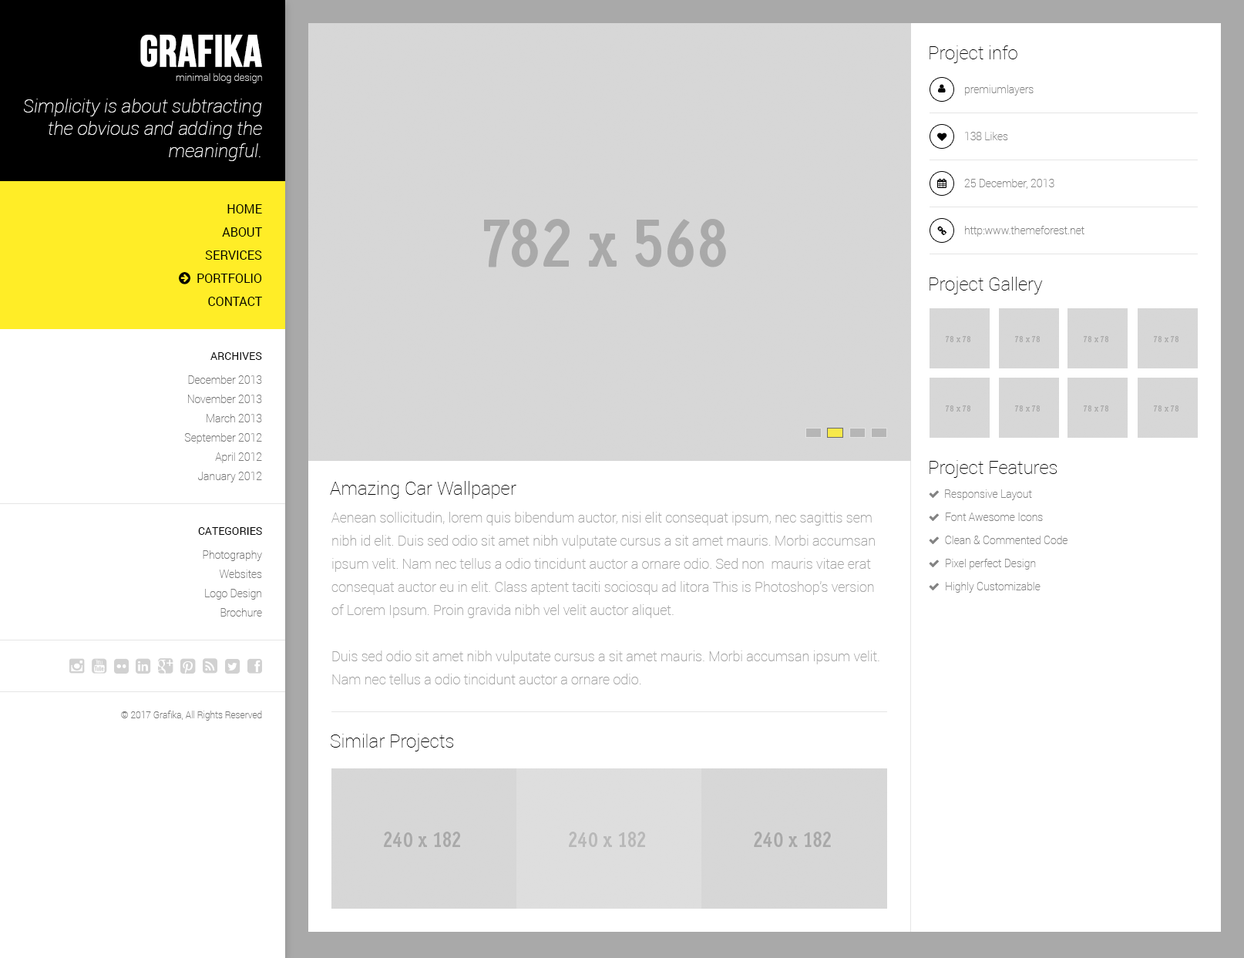
<style>
.page{position:relative;width:1244px;height:958px;background:#ffffff}
.page>*{position:absolute;margin:0}
.t1{font:44.7px "BebasNeue";color:#ffffff;text-transform:uppercase;font-weight:bold}
.t2{font:18.5px "Roboto-Thin";color:#000000}
.t3{font:10px "Roboto-Thin";color:#cacaca}
.t4{font:10.8px "Roboto-Thin";color:#848484}
.t5{font:18.5px "Roboto-ThinItalic";color:#ffffff}
.t6{font:12.3px/23.1px "Roboto-Regular";color:#000000;text-transform:uppercase}
.t7{font:10.8px "Roboto-Regular";color:#000000;text-transform:uppercase}
.t8{font:10.8px/19.3px "Roboto-Thin";color:#787878}
.t9{font:13.9px/23.1px "Roboto-Thin";color:#a3a3a3}
.t10{font:9.3px "Roboto-Thin";color:#787878}
</style>
<div class="page">
<p class="t1" style="left:140px;top:35px;width:122px;height:32px">Grafika</p>
<p class="t2" style="left:930px;top:45px;width:88px;height:18px">Project info</p>
<p class="t3" style="left:176px;top:73px;width:86px;height:10px">minimal blog design</p>
<p class="t4" style="left:965px;top:85px;width:69px;height:11px">premiumlayers</p>
<p class="t5" style="left:24px;top:99px;width:238px;height:62px;text-align:right">Simplicity is about subtracting the obvious and adding the meaningful.</p>
<p class="t4" style="left:965px;top:132px;width:43px;height:8px">138 Likes</p>
<p class="t4" style="left:964px;top:179px;width:91px;height:10px">25 December, 2013</p>
<p class="t6" style="left:197px;top:204px;width:65px;height:102px;text-align:right">Home<br>About<br>Services<br>Portfolio<br>Contact</p>
<p class="t4" style="left:965px;top:226px;width:120px;height:11px">http:www.themeforest.net</p>
<p class="t2" style="left:930px;top:277px;width:113px;height:18px">Project Gallery</p>
<p class="t7" style="left:210px;top:352px;width:52px;height:8px">Archives</p>
<p class="t8" style="left:184px;top:375px;width:78px;height:108px;text-align:right">December 2013<br>November 2013<br>March 2013<br>September 2012<br>April 2012<br>January 2012</p>
<p class="t2" style="left:930px;top:460px;width:127px;height:18px">Project Features</p>
<p class="t2" style="left:330px;top:481px;width:187px;height:18px">Amazing Car Wallpaper</p>
<p class="t9" style="left:332px;top:512px;width:548px;height:173px">Aenean sollicitudin, lorem quis bibendum auctor, nisi elit consequat ipsum, nec sagittis sem nibh id elit. Duis sed odio sit amet nibh vulputate cursus a sit amet mauris. Morbi accumsan ipsum velit. Nam nec tellus a odio tincidunt auctor a ornare odio. Sed non  mauris vitae erat consequat auctor eu in elit. Class aptent taciti sociosqu ad litora This is Photoshop's version  of Lorem Ipsum. Proin gravida nibh vel velit auctor aliquet.<br><br>Duis sed odio sit amet nibh vulputate cursus a sit amet mauris. Morbi accumsan ipsum velit. Nam nec tellus a odio tincidunt auctor a ornare odio.</p>
<p class="t7" style="left:198px;top:527px;width:64px;height:8px">Categories</p>
<p class="t8" style="left:203px;top:550px;width:59px;height:67px;text-align:right">Photography<br>Websites<br>Logo Design<br>Brochure</p>
<p class="t10" style="left:121px;top:711px;width:141px;height:10px">© 2017 Grafika, All Rights Reserved</p>
<p class="t2" style="left:331px;top:734px;width:122px;height:18px">Similar Projects</p>
</div>
